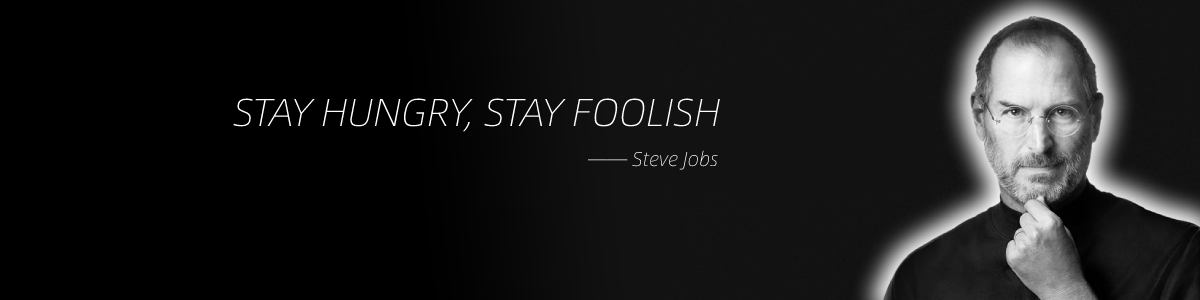
<style>
.page{position:relative;width:1200px;height:300px;background:#000000}
.page>*{position:absolute;margin:0}
.t1{font:39px "AlibabaSans-LightItalic";color:#ffffff}
.t2{font:20px "AlibabaSans-LightItalic";color:#ffffff}
.t3{font:20px "AlibabaPuHuiTi-Light";color:#ffffff}
</style>
<div class="page">
<p class="t1" style="left:233px;top:98px;width:487px;height:34px">STAY HUNGRY, STAY FOOLISH</p>
<p class="t2" style="left:588px;top:150px;width:130px;height:20px"><span class="t3">——</span> Steve Jobs</p>
</div>
